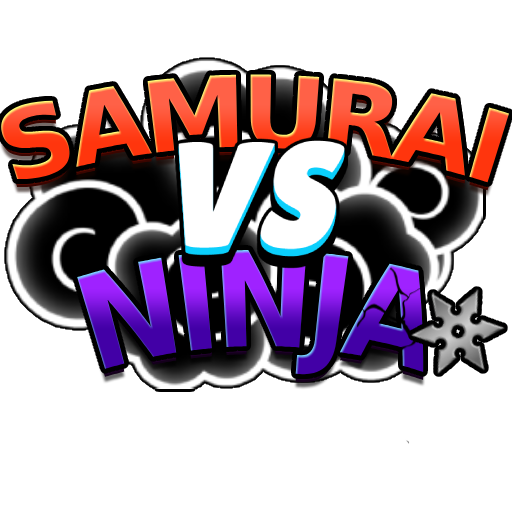
<style>
.page{position:relative;width:512px;height:512px;background:#ffffff}
.page>*{position:absolute;margin:0}
.t1{font:98.8px "AsketCondensed-ExtraBold";letter-spacing:-0.05em;text-transform:uppercase}
.t2{font:131.7px "AsketCondensed-ExtraBold";letter-spacing:-0.05em;text-transform:uppercase;scale:0.83 1}
</style>
<div class="page">
<p class="t1" style="left:0px;top:74px;width:510px;height:109px">SAMURAI</p>
<p class="t2" style="left:77px;top:250px;width:347px;height:125px">NINJA</p>
</div>
